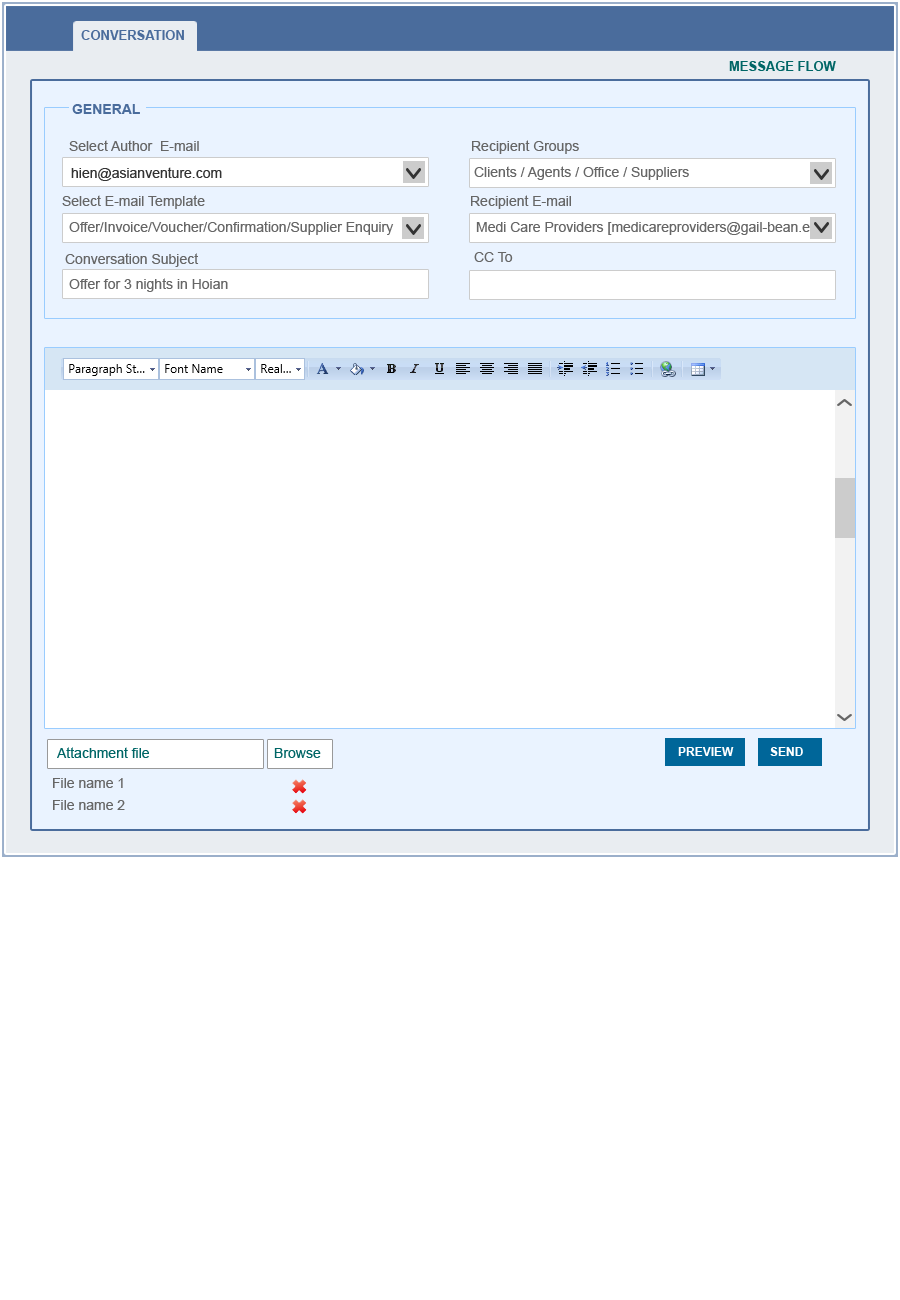
<style>
.page{position:relative;width:900px;height:1300px;background:#ffffff}
.page>*{position:absolute;margin:0}
.t1{font:13px "Arial-BoldMT";color:#4a6c9c}
.t2{font:13px "Arial-BoldMT";color:#006666}
.t3{font:14px "Arial-BoldMT";color:#4a6c9c}
.t4{font:14px "ArialMT";color:#666666}
.t5{font:14px "ArialMT";color:#333333}
.t6{font:14px "ArialMT";color:#006666}
.t7{font:12px "Arial-BoldMT";color:#ffffff}
.t8{font:14px/22px "ArialMT";color:#666666}
</style>
<div class="page">
<p class="t1" style="left:81px;top:30px;width:103px;height:10px">CONVERSATION</p>
<p class="t2" style="left:729px;top:61px;width:107px;height:10px">MESSAGE FLOW</p>
<p class="t3" style="left:72px;top:104px;width:68px;height:10px">GENERAL</p>
<p class="t4" style="left:69px;top:140px;width:130px;height:11px">Select Author  E-mail</p>
<p class="t4" style="left:472px;top:140px;width:107px;height:14px">Recipient Groups</p>
<p class="t5" style="left:71px;top:167px;width:151px;height:14px">hien@asianventure.com</p>
<p class="t4" style="left:474px;top:166px;width:215px;height:14px">Clients / Agents / Office / Suppliers</p>
<p class="t4" style="left:62px;top:195px;width:143px;height:14px">Select E-mail Template</p>
<p class="t4" style="left:471px;top:195px;width:100px;height:14px">Recipient E-mail</p>
<p class="t4" style="left:69px;top:221px;width:325px;height:14px">Offer/Invoice/Voucher/Confirmation/Supplier Enquiry</p>
<p class="t4" style="left:476px;top:222px;width:345px;height:13px">Medi Care Providers [medicareproviders@gail-bean.eu]</p>
<p class="t4" style="left:65px;top:253px;width:134px;height:14px">Conversation Subject</p>
<p class="t4" style="left:474px;top:252px;width:39px;height:10px">CC To</p>
<p class="t4" style="left:69px;top:278px;width:159px;height:14px">Offer for 3 nights in Hoian</p>
<p class="t6" style="left:57px;top:747px;width:264px;height:11px">Attachment file                                Browse</p>
<p class="t7" style="left:678px;top:747px;width:125px;height:9px">PREVIEW           SEND</p>
<p class="t8" style="left:53px;top:778px;width:72px;height:32px;text-align:justify">File name 1<br>File name 2</p>
</div>
